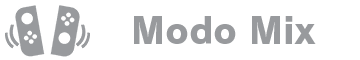
<style>
.page{position:relative;width:360px;height:60px;background:#ffffff}
.page>*{position:absolute;margin:0}
.t1{font:36px "RodinPro-EB";color:#989a9d}
</style>
<div class="page">
<p class="t1" style="left:134px;top:16px;width:182px;height:28px">Modo Mix</p>
</div>
